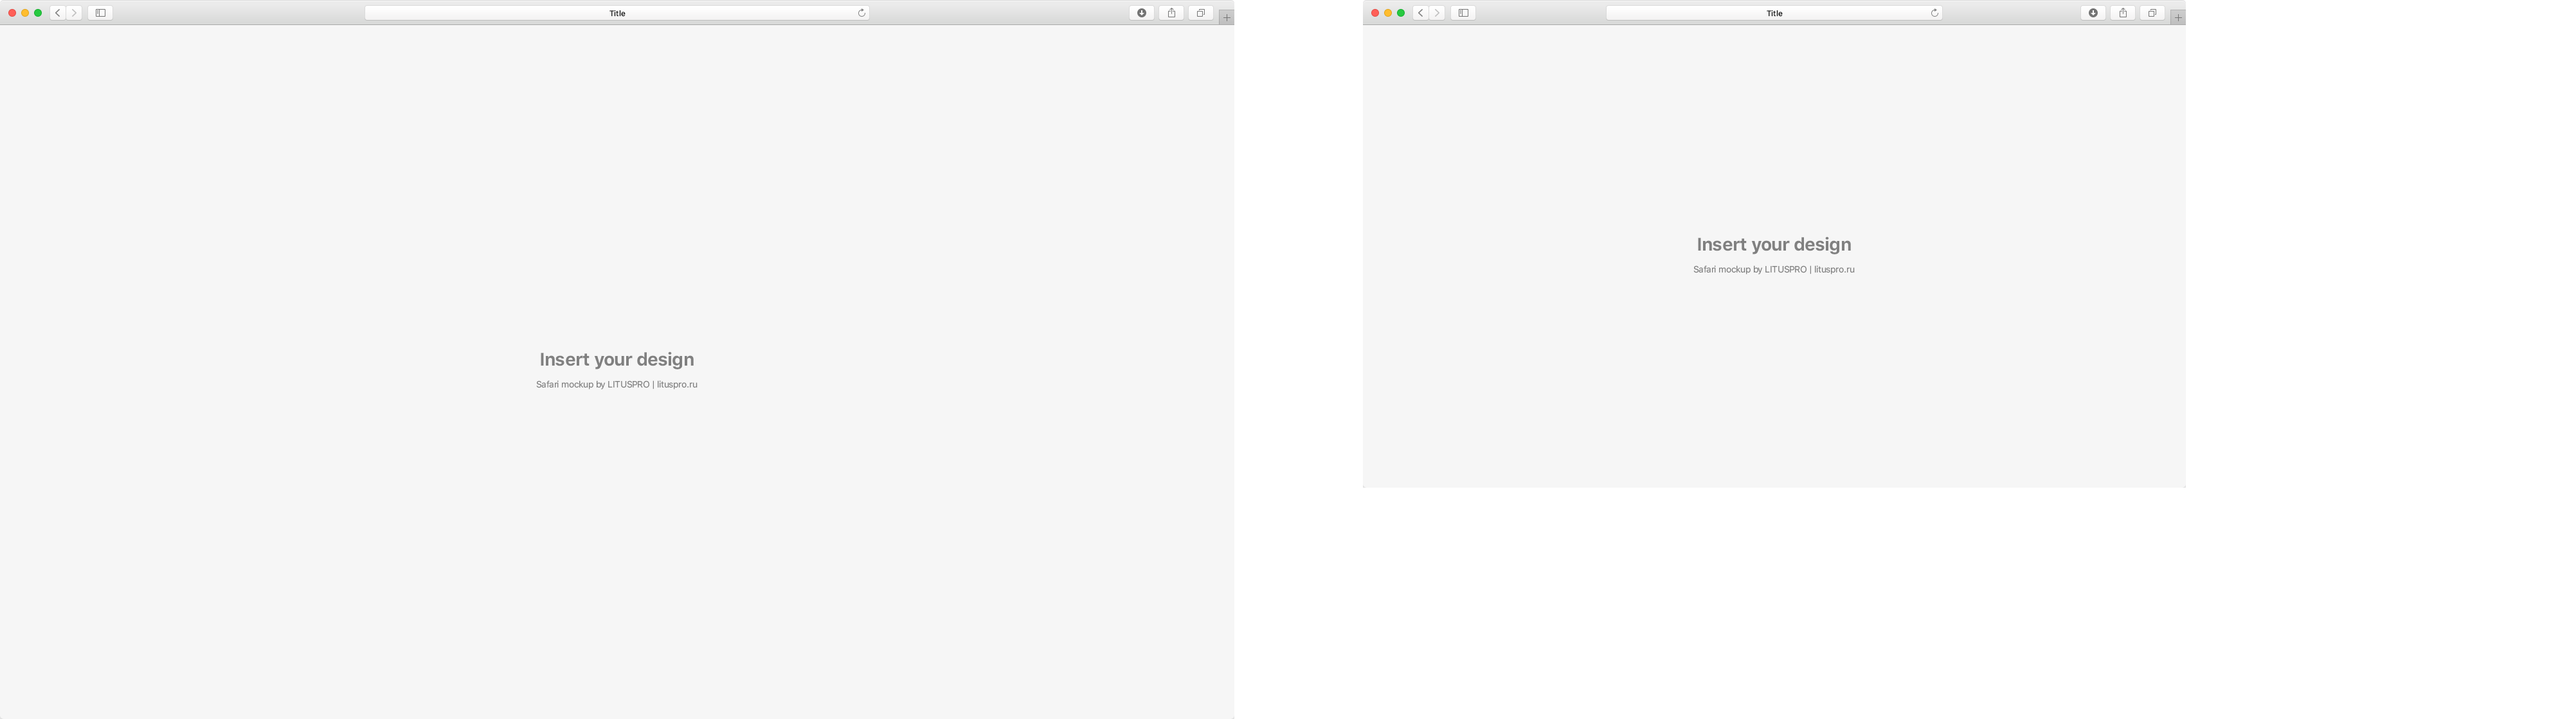
<style>
.page{position:relative;width:2551px;height:719px;background:#f6f6f6}
.page>*{position:absolute;margin:0}
.t1{font:7.7px "SFProText-Regular";color:#000000}
.t2{font:18px "SFProText-Bold";letter-spacing:-0.03em;color:#808080}
.t3{font:9px "SFProText-Regular";letter-spacing:-0.03em;color:#808080}
</style>
<div class="page">
<p class="t1" style="left:609px;top:10px;width:17px;height:7px">Title</p>
<p class="t1" style="left:1767px;top:10px;width:16px;height:7px">Title</p>
<p class="t2" style="left:1698px;top:237px;width:153px;height:18px">Insert your design</p>
<p class="t3" style="left:1693px;top:266px;width:162px;height:8px">Safari mockup by LITUSPRO | lituspro.ru</p>
<p class="t2" style="left:541px;top:352px;width:153px;height:18px">Insert your design</p>
<p class="t3" style="left:536px;top:381px;width:162px;height:9px">Safari mockup by LITUSPRO | lituspro.ru</p>
</div>
